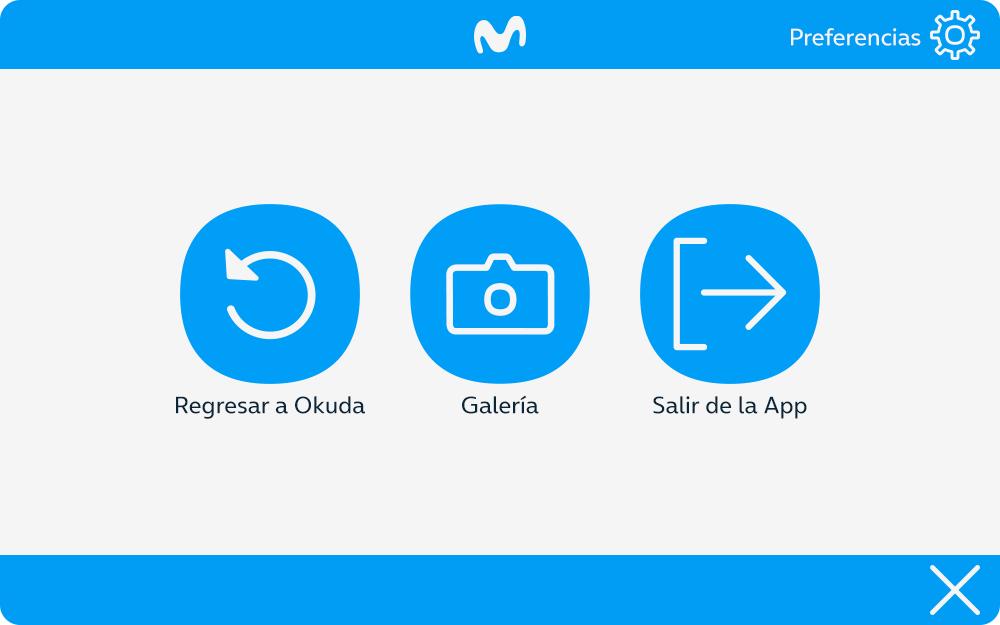
<style>
.page{position:relative;width:1000px;height:625px;background:#f5f5f5}
.page>*{position:absolute;margin:0}
.t1{font:24px "OnAir-Regular";color:#f5f5f5}
.t2{font:24px "OnAir-Regular";color:#0a2739}
</style>
<div class="page">
<p class="t1" style="left:791px;top:28px;width:130px;height:18px">Preferencias</p>
<p class="t2" style="left:176px;top:396px;width:189px;height:23px">Regresar a Okuda</p>
<p class="t2" style="left:462px;top:395px;width:77px;height:19px">Galería</p>
<p class="t2" style="left:653px;top:396px;width:154px;height:23px">Salir de la App</p>
</div>
